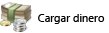
<style>
.page{position:relative;width:109px;height:33px;background:#ffffff}
.page>*{position:absolute;margin:0}
.t1{font:11px "SegoeUI";color:#000000}
</style>
<div class="page">
<p class="t1" style="left:38px;top:14px;width:67px;height:10px">Cargar dinero</p>
</div>
